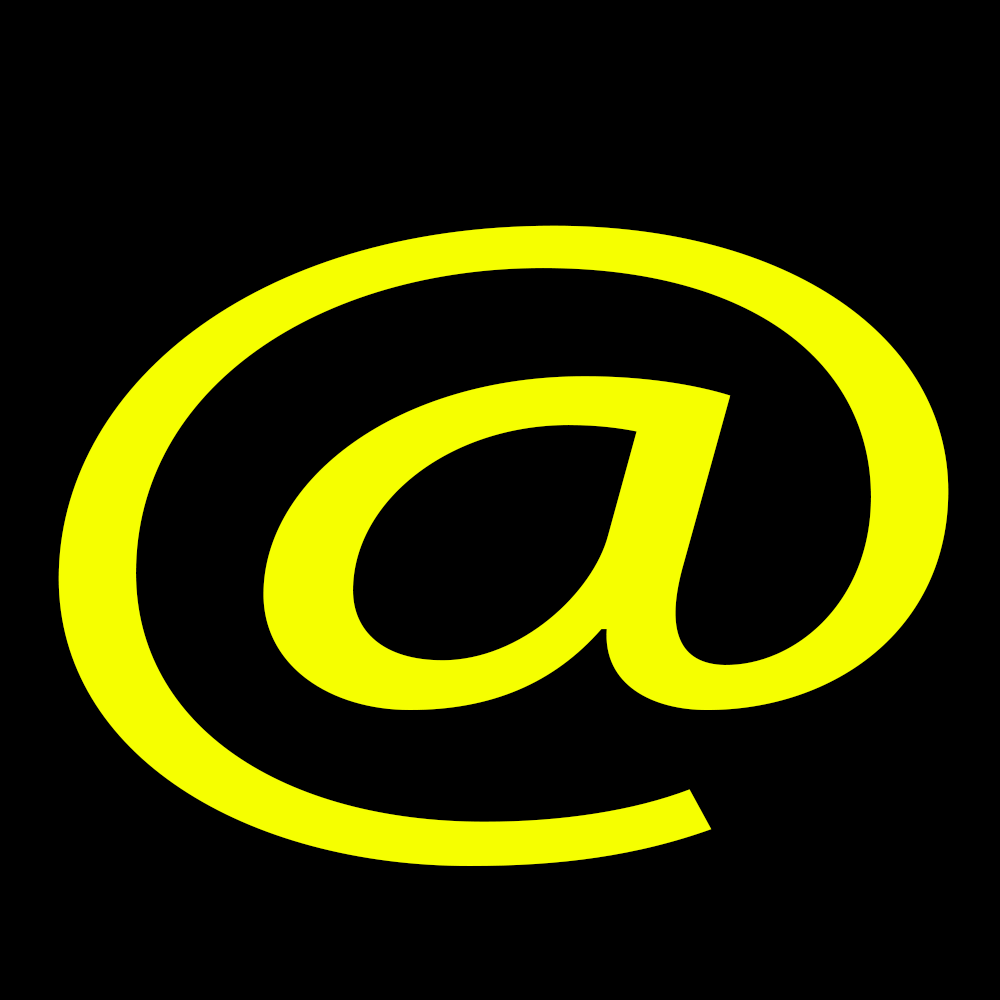
<style>
.page{position:relative;width:1000px;height:1000px;background:#000000}
.page>*{position:absolute;margin:0}
.t1{font:920px "MyriadPro-Regular";color:#f6ff00;scale:1.47 1}
</style>
<div class="page">
<p class="t1" style="left:58px;top:225px;width:891px;height:641px">@</p>
</div>
